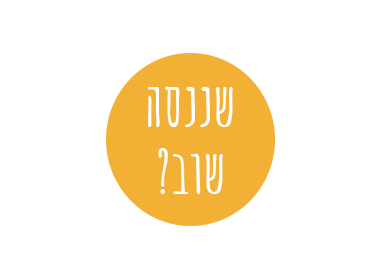
<style>
.page{position:relative;width:376px;height:270px;background:#ffffff}
.page>*{position:absolute;margin:0}
.t1{font:60px/67px "AmaticSC-Bold";color:#ffffff}
</style>
<div class="page">
<p class="t1" style="left:147px;top:86px;width:86px;height:108px;text-align:center">שננסה<br>שוב?</p>
</div>
